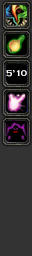
<style>
.page{position:relative;width:32px;height:256px;background:#333333}
.page>*{position:absolute;margin:0}
.t1{font:8.8px "CopperplateGothic-Bold";letter-spacing:0.01em;color:#ffffff}
</style>
<div class="page">
<p class="t1" style="left:6px;top:70px;width:21px;height:7px">5’10</p>
</div>
